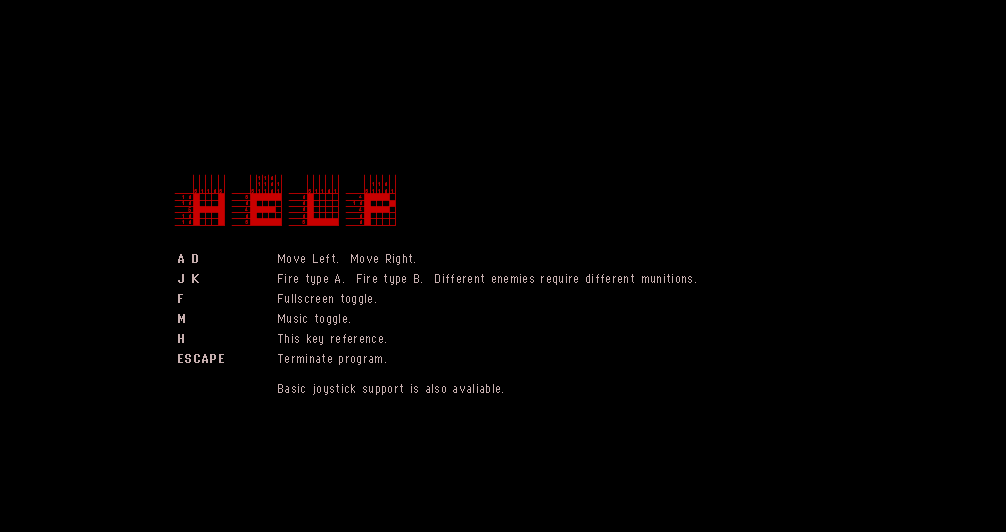
<style>
.page{position:relative;width:1006px;height:532px;background:#000000}
.page>*{position:absolute;margin:0}
.t1{font:8px "Copy0966";letter-spacing:0.042em;color:#c7afaf}
.t2{font:8px "Copy0956";letter-spacing:0.042em;color:#c7afaf}
</style>
<div class="page">
<p class="t1" style="left:178px;top:254px;width:20px;height:9px">A D</p>
<p class="t2" style="left:278px;top:254px;width:137px;height:11px">Move Left.  Move Right.</p>
<p class="t1" style="left:178px;top:274px;width:21px;height:9px">J K</p>
<p class="t2" style="left:278px;top:274px;width:418px;height:11px">Fire type A.  Fire type B.  Different enemies require different munitions.</p>
<p class="t1" style="left:178px;top:294px;width:5px;height:9px">F</p>
<p class="t2" style="left:278px;top:294px;width:98px;height:11px">Fullscreen toggle.</p>
<p class="t1" style="left:178px;top:314px;width:7px;height:9px">M</p>
<p class="t2" style="left:278px;top:314px;width:72px;height:11px">Music toggle.</p>
<p class="t1" style="left:178px;top:334px;width:6px;height:9px">H</p>
<p class="t2" style="left:278px;top:334px;width:108px;height:11px">This key reference.</p>
<p class="t1" style="left:178px;top:354px;width:46px;height:9px">ESCAPE</p>
<p class="t2" style="left:278px;top:354px;width:108px;height:11px">Terminate program.</p>
<p class="t2" style="left:278px;top:384px;width:225px;height:11px">Basic joystick support is also avaliable.</p>
</div>
